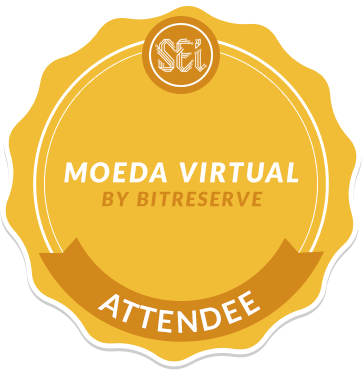
<style>
.page{position:relative;width:362px;height:375px;background:#f2bd36}
.page>*{position:absolute;margin:0}
.t1{font:27px/24px "Lato-BlackItalic";letter-spacing:0.1em;color:#ffffff}
.t2{font:35px/24px "Lato-BlackItalic";letter-spacing:0.1em;color:#ffffff}
.t3{font:20px/24px "Lato-BlackItalic";letter-spacing:0.1em;color:#ffffff}
.t4{font:20px/24px "Lato-BlackItalic";letter-spacing:0.1em;color:#d2881b}
.t5{font:29.7px "Lato-Bold";letter-spacing:0.1em;color:#ffffff}
</style>
<div class="page">
<p class="t1" style="left:64px;top:162px;width:235px;height:45px;text-align:center"><span class="t2"><br></span>MOEDA VIRTUAL <span class="t3"><br></span><span class="t4">BY BITRESERVE</span></p>
<p class="t5" style="left:97px;top:290px;width:164px;height:43px">ATTENDEE</p>
</div>
